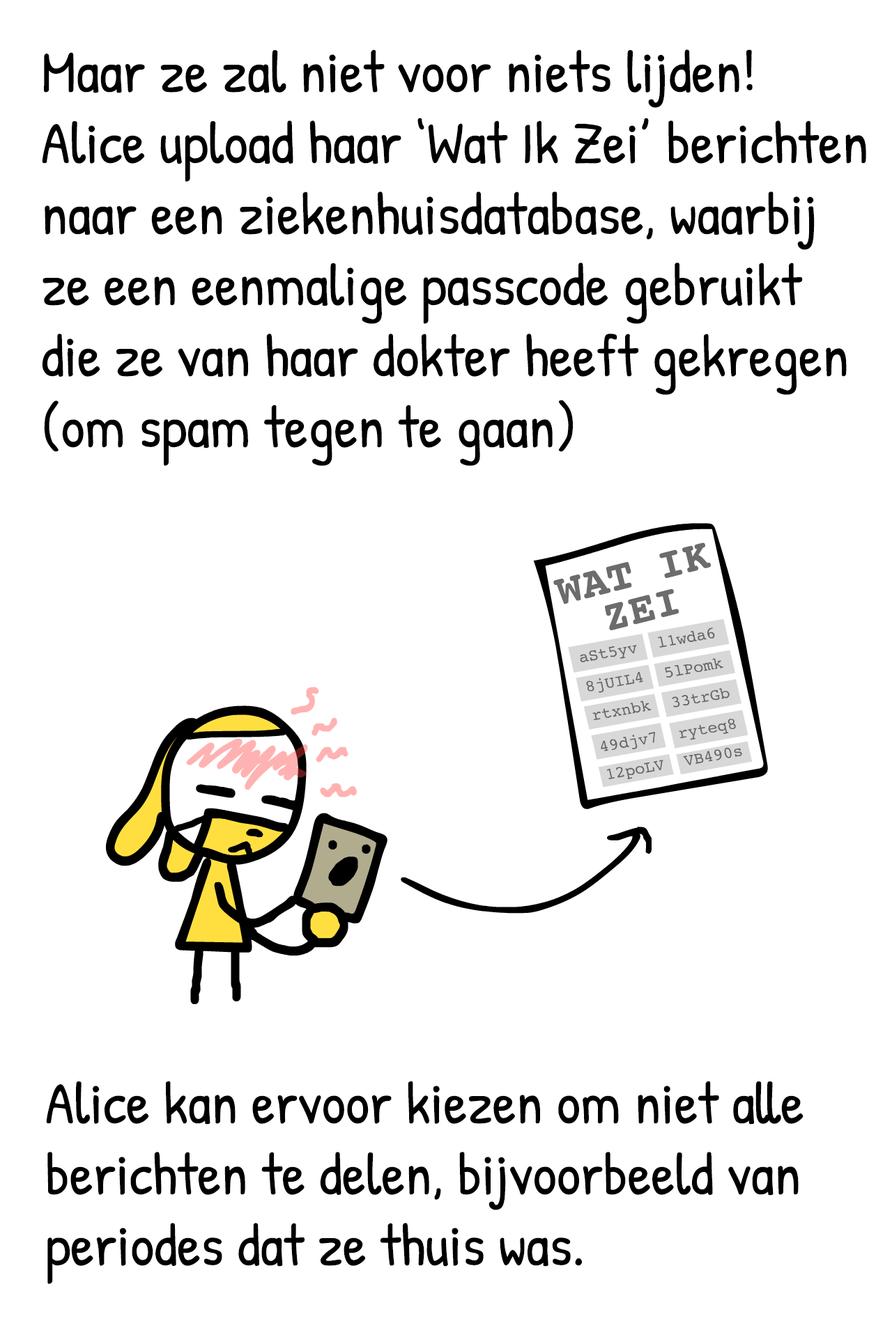
<style>
.page{position:relative;width:892px;height:1337px;background:#ffffff}
.page>*{position:absolute;margin:0}
.t1{font:59.2px "PatrickHand-Regular";color:#000000}
.t2{font:43.6px/37.1px "Courier-Bold";color:#6c6c6c}
</style>
<div class="page">
<p class="t1" style="left:42px;top:49px;width:824px;height:417px">Maar ze zal niet voor niets lijden!<br>Alice upload haar ‘Wat Ik Zei’ berichten <br>naar een ziekenhuisdatabase, waarbij <br>ze een eenmalige passcode gebruikt <br>die ze van haar dokter heeft gekregen<br>(om spam tegen te gaan)</p>
<p class="t2" style="left:553px;top:543px;width:157px;height:87px;text-align:center;rotate:-14deg">WAT IK<br>ZEI</p>
<p class="t1" style="left:46px;top:1081px;width:757px;height:203px">Alice kan ervoor kiezen om niet alle<br>berichten te delen, bijvoorbeeld van<br>periodes dat ze thuis was.</p>
</div>
